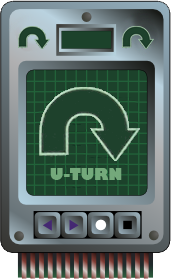
<style>
.page{position:relative;width:171px;height:279px}
.page>*{position:absolute;margin:0}
.t1{font:16px "GillSans-UltraBold";letter-spacing:-0.02em;color:#74a97b}
</style>
<div class="page">
<p class="t1" style="left:50px;top:168px;width:72px;height:12px">U-TURN</p>
</div>
